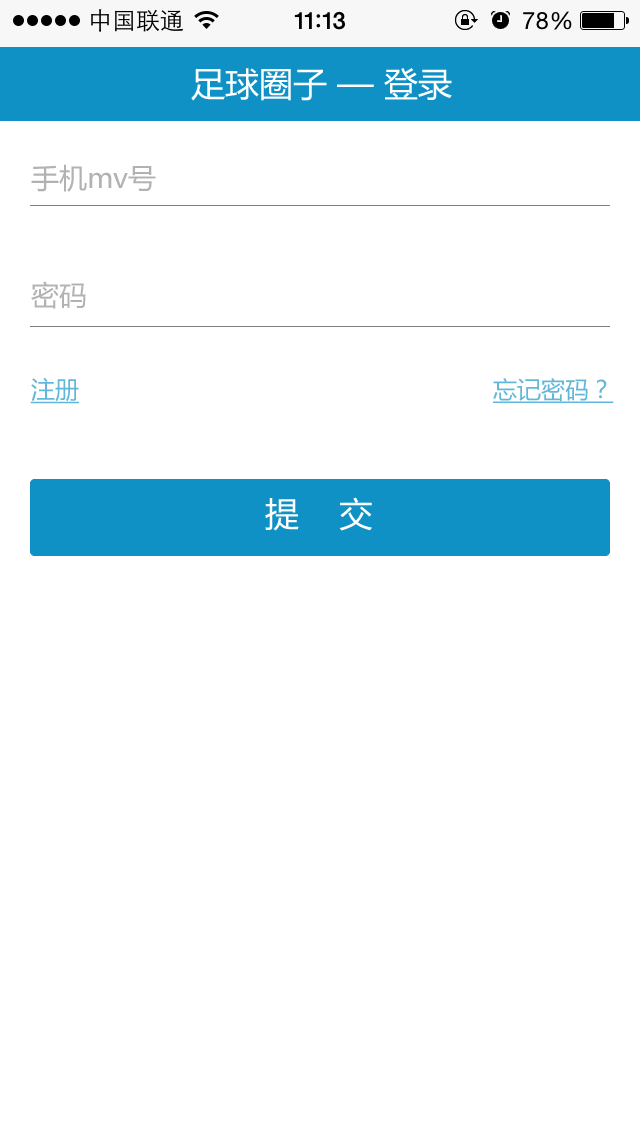
<style>
.page{position:relative;width:640px;height:1136px;background:#ffffff}
.page>*{position:absolute;margin:0}
.t1{font:34px "MicrosoftYaHei";color:#ffffff}
.t2{font:28px "MicrosoftYaHei";color:#b2b2b2}
.t3{font:24px "MicrosoftYaHei";color:#61b7da;text-decoration:underline}
</style>
<div class="page">
<p class="t1" style="left:191px;top:68px;width:261px;height:33px">足球圈子 — 登录</p>
<p class="t2" style="left:31px;top:164px;width:125px;height:28px">手机mv号</p>
<p class="t2" style="left:31px;top:281px;width:55px;height:28px">密码</p>
<p class="t3" style="left:30px;top:377px;width:49px;height:27px">注册</p>
<p class="t3" style="left:493px;top:378px;width:121px;height:25px">忘记密码？</p>
<p class="t1" style="left:265px;top:497px;width:107px;height:34px">提    交</p>
</div>
